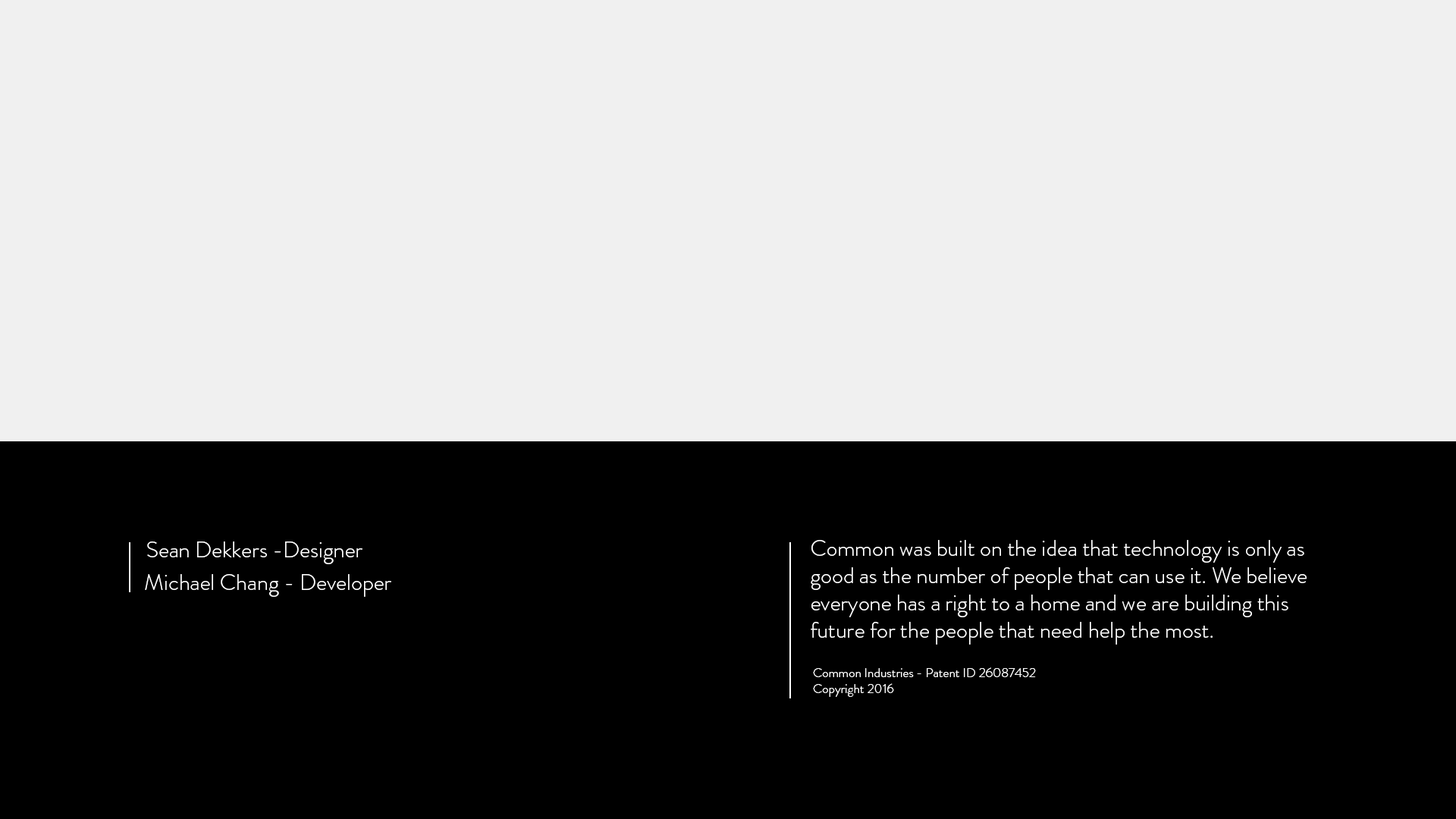
<style>
.page{position:relative;width:1456px;height:819px;background:#f0f0f0}
.page>*{position:absolute;margin:0}
.t1{font:22.7px "BrandonGrotesque-Light";color:#ffffff}
.t2{font:13.1px "BrandonGrotesque-Light";color:#ffffff}
</style>
<div class="page">
<p class="t1" style="left:147px;top:541px;width:215px;height:23px">Sean Dekkers -Designer</p>
<p class="t1" style="left:811px;top:540px;width:496px;height:105px">Common was built on the idea that technology is only as good as the number of people that can use it. We believe everyone has a right to a home and we are building this future for the people that need help the most.</p>
<p class="t1" style="left:145px;top:574px;width:246px;height:23px">Michael Chang - Developer</p>
<p class="t2" style="left:813px;top:667px;width:223px;height:30px">Common Industries - Patent ID 26087452 <br>Copyright 2016</p>
</div>
